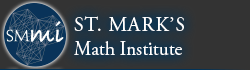
<style>
.page{position:relative;width:250px;height:70px;background:#333333}
.page>*{position:absolute;margin:0}
.t1{font:20px "AGaramondPro-Regular";color:#ffffff;scale:0.96 1}
.t2{font:20px "AGaramondPro-Regular";letter-spacing:0.05em;color:#ffffff}
</style>
<div class="page">
<p class="t1" style="left:74px;top:16px;width:110px;height:40px"><span class="t2">ST. MARK’S<br></span>Math Institute</p>
</div>
